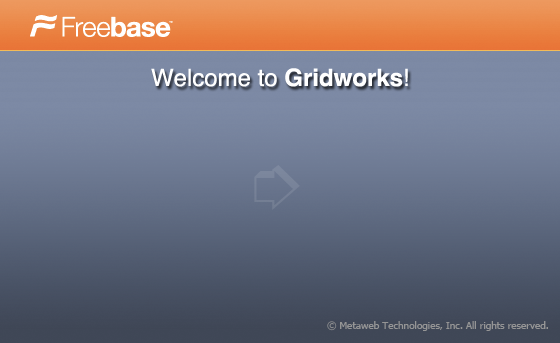
<style>
.page{position:relative;width:560px;height:343px}
.page>*{position:absolute;margin:0}
.t1{font:24px "Helvetica";color:#ffffff}
.t2{font:24px "Helvetica-Bold";color:#ffffff}
.t3{font:10px "Tahoma";color:#959595}
</style>
<div class="page">
<p class="t1" style="left:151px;top:68px;width:257px;height:19px">Welcome to <span class="t2">Gridworks</span>!</p>
<p class="t3" style="left:327px;top:321px;width:221px;height:10px">© Metaweb Technologies, Inc. All rights reserved.</p>
</div>
